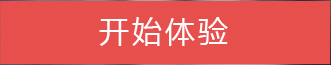
<style>
.page{position:relative;width:331px;height:65px;background:#e74f4d}
.page>*{position:absolute;margin:0}
.t1{font:30px "MicrosoftYaHei";letter-spacing:0.1em;color:#ffffff}
</style>
<div class="page">
<p class="t1" style="left:99px;top:17px;width:129px;height:29px">开始体验</p>
</div>
